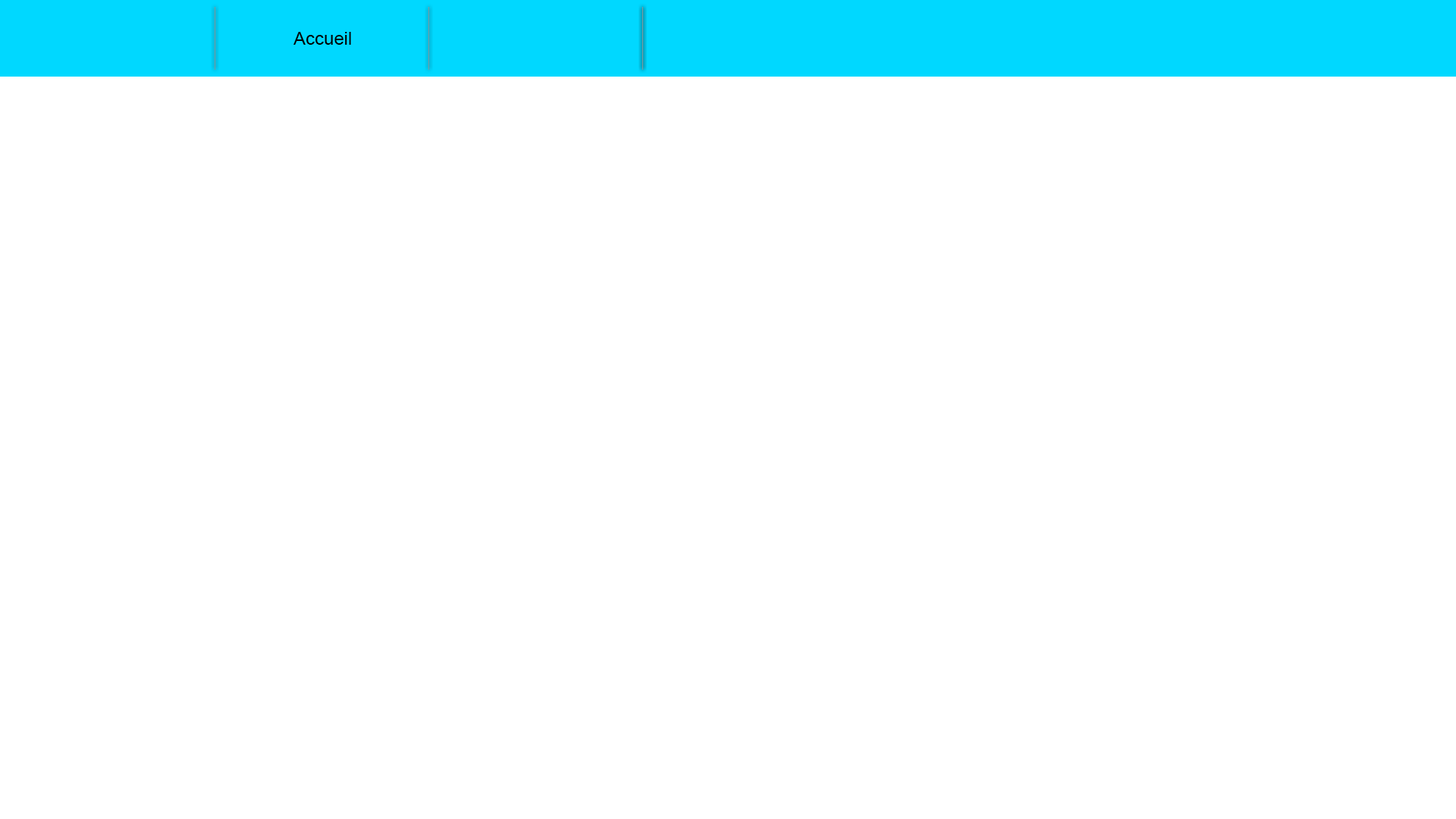
<style>
.page{position:relative;width:1456px;height:819px;background:#ffffff}
.page>*{position:absolute;margin:0}
.t1{font:18.2px "ArialMT";color:#010101}
</style>
<div class="page">
<p class="t1" style="left:293px;top:32px;width:58px;height:13px">Accueil</p>
</div>
